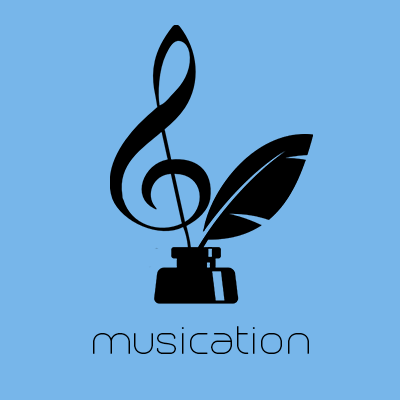
<style>
.page{position:relative;width:400px;height:400px;background:#77b6ea}
.page>*{position:absolute;margin:0}
.t1{font:50px "Trench-Thin";color:#000000}
</style>
<div class="page">
<p class="t1" style="left:93px;top:326px;width:216px;height:28px">musication</p>
</div>
